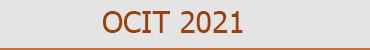
<style>
.page{position:relative;width:370px;height:50px;background:#e4e4e4}
.page>*{position:absolute;margin:0}
.t1{font:30px "Tahoma";color:#98420a}
</style>
<div class="page">
<p class="t1" style="left:103px;top:11px;width:140px;height:22px">OCIT 2021</p>
</div>
